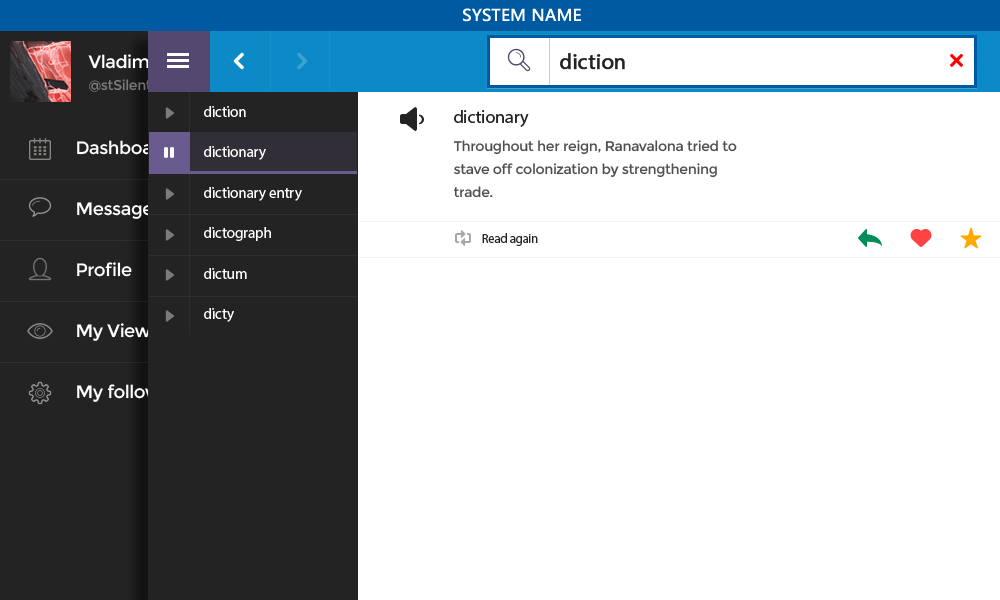
<style>
.page{position:relative;width:1000px;height:600px;background:#ffffff}
.page>*{position:absolute;margin:0}
.t1{font:16px "MicrosoftYaHei";color:#ffffff;font-weight:bold}
.t2{font:18px "Montserrat-Regular";letter-spacing:-0.02em}
.t3{font:22px "MyriadPro-Regular";color:#232323;font-weight:bold}
.t4{font:14px "Montserrat-Regular";letter-spacing:-0.02em;color:#7b7b7b}
.t5{font:15px/40.5px "MyriadPro-Regular";color:#ffffff}
.t6{font:18px "MyriadPro-Regular";color:#232323}
.t7{font:18px/61px "Montserrat-Regular";letter-spacing:-0.02em;color:#ffffff}
.t8{font:14px/23px "Montserrat-Regular";letter-spacing:-0.02em;color:#4f4f4f}
.t9{font:13px "MyriadPro-Regular";letter-spacing:-0.02em;color:#232323}
</style>
<div class="page">
<p class="t1" style="left:463px;top:8px;width:118px;height:14px">SYSTEM NAME</p>
<p class="t2" style="left:88px;top:54px;width:149px;height:15px">Vladimir Kudinov</p>
<p class="t3" style="left:560px;top:53px;width:65px;height:17px">diction</p>
<p class="t4" style="left:89px;top:79px;width:63px;height:13px">@stSilent</p>
<p class="t5" style="left:204px;top:106px;width:98px;height:216px">diction<br>dictionary<br>dictionary entry<br>dictograph<br>dictum<br>dicty</p>
<p class="t6" style="left:454px;top:110px;width:75px;height:17px">dictionary</p>
<p class="t7" style="left:77px;top:140px;width:110px;height:262px">Dashboard<br>Messages<br>Profile<br>My Views<br>My followers</p>
<p class="t8" style="left:454px;top:140px;width:283px;height:58px">Throughout her reign, Ranavalona tried to stave off colonization by strengthening trade.</p>
<p class="t9" style="left:482px;top:233px;width:56px;height:13px">Read again</p>
</div>
